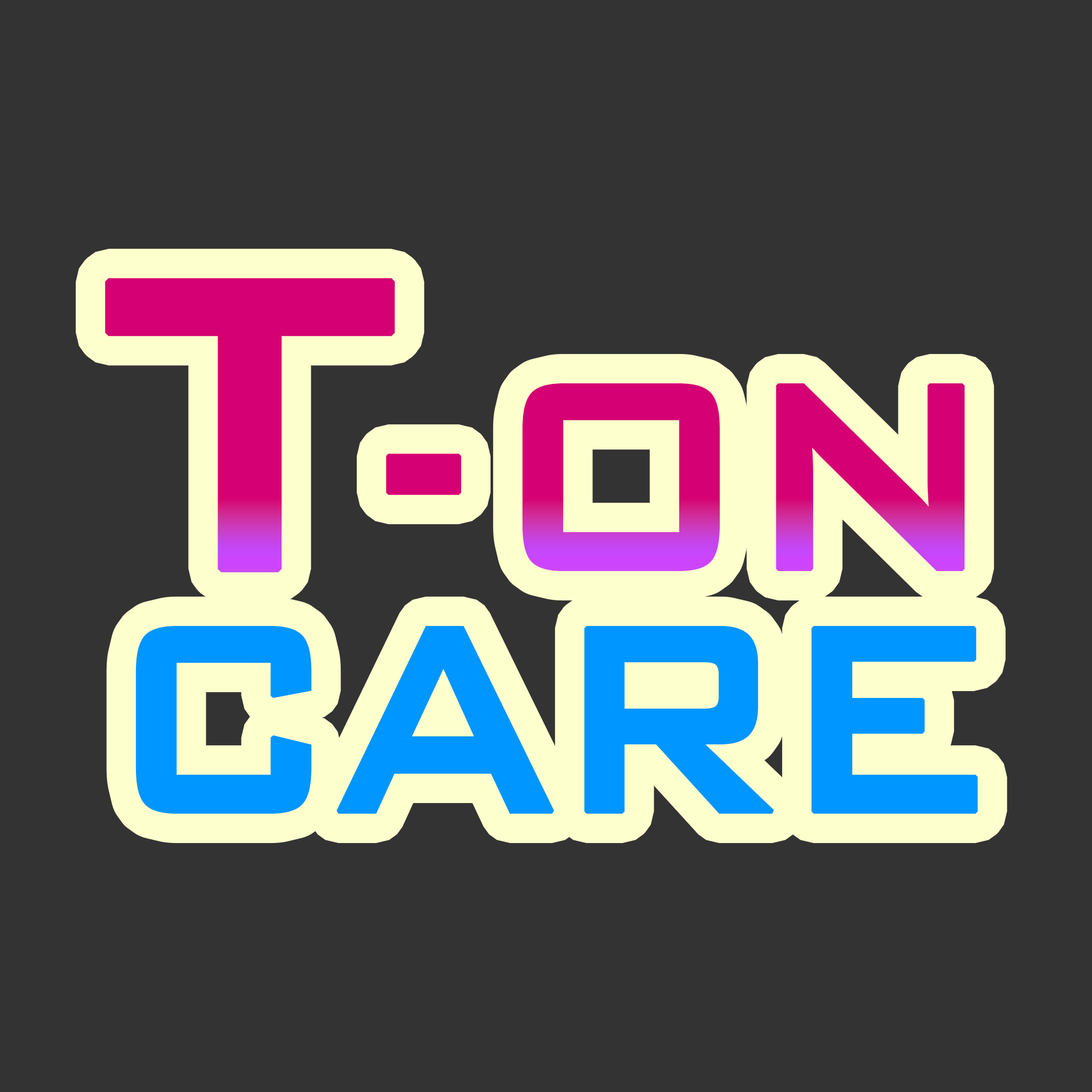
<style>
.page{position:relative;width:1092px;height:1092px;background:#333333}
.page>*{position:absolute;margin:0}
.t1{font:355.1px/242.8px "BankGothicBT-Medium";letter-spacing:-0.08em;font-weight:bold;scale:0.85 1}
.t2{font:556.5px/242.8px "BankGothicBT-Medium";letter-spacing:-0.08em;font-weight:bold;scale:0.85 1}
</style>
<div class="page">
<p class="t1" style="left:105px;top:278px;width:873px;height:536px"><span class="t2">T</span>- ON<br>CARE</p>
</div>
